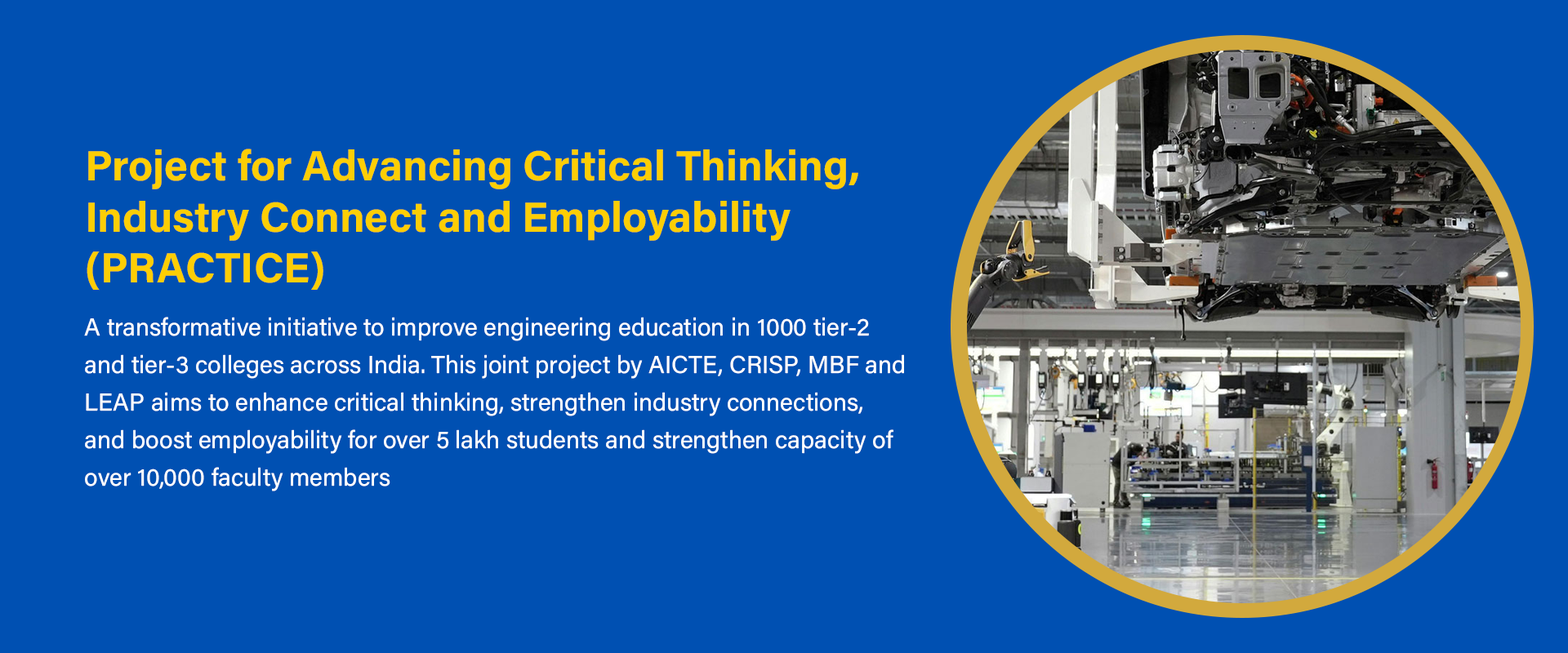
<style>
.page{position:relative;width:1568px;height:653px;background:#0050b2}
.page>*{position:absolute;margin:0}
.t1{font:42.5px "AcuminConcept-Bold";color:#fdce04}
.t2{font:24.5px/37.6px "AcuminConcept-Regular";color:#ffffff}
</style>
<div class="page">
<p class="t1" style="left:87px;top:149px;width:771px;height:142px">Project for Advancing Critical Thinking, Industry Connect and Employability (PRACTICE)</p>
<p class="t2" style="left:84px;top:317px;width:820px;height:175px">A transformative initiative to improve engineering education in 1000 tier-2 and tier-3 colleges across India. This joint project by AICTE, CRISP, MBF and LEAP aims to enhance critical thinking, strengthen industry connections, and boost employability for over 5 lakh students and strengthen capacity of over 10,000 faculty members</p>
</div>
